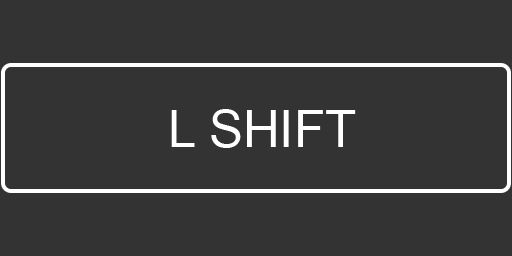
<style>
.page{position:relative;width:512px;height:256px;background:#333333}
.page>*{position:absolute;margin:0}
.t1{font:50.7px "ArialMT";color:#ffffff}
</style>
<div class="page">
<p class="t1" style="left:171px;top:109px;width:185px;height:39px">L SHIFT</p>
</div>
